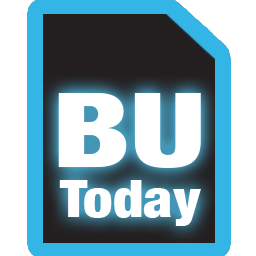
<style>
.page{position:relative;width:256px;height:256px;background:#ffffff}
.page>*{position:absolute;margin:0}
.t1{font:102.6px "HelveticaNeueLTCom-BlkCn";color:#ffffff;scale:1.33 1}
.t2{font:52.2px "HelveticaNeueLTCom-BlkCn";color:#ffffff;scale:1.13 1}
</style>
<div class="page">
<p class="t1" style="left:58px;top:93px;width:143px;height:75px">BU</p>
<p class="t1" style="left:58px;top:93px;width:143px;height:75px">BU</p>
<p class="t2" style="left:59px;top:180px;width:142px;height:46px">Today</p>
<p class="t2" style="left:59px;top:180px;width:142px;height:46px">Today</p>
</div>
